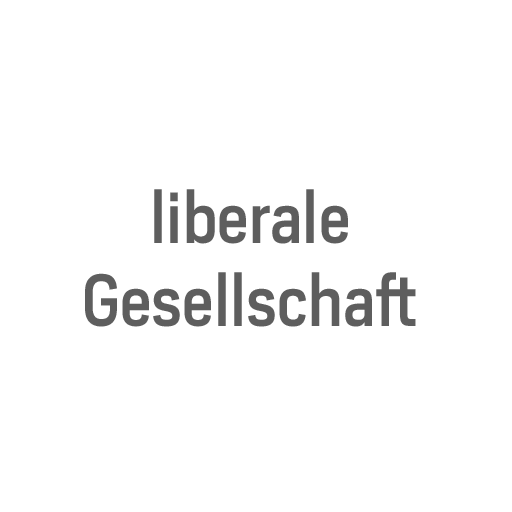
<style>
.page{position:relative;width:512px;height:512px;background:#ffffff}
.page>*{position:absolute;margin:0}
.t1{font:69px "HeronSans-Medium";letter-spacing:0.005em;color:#5e5e5e;scale:0.92 1}
</style>
<div class="page">
<p class="t1" style="left:85px;top:189px;width:331px;height:138px;text-align:center">liberale<br>Gesellschaft</p>
</div>
